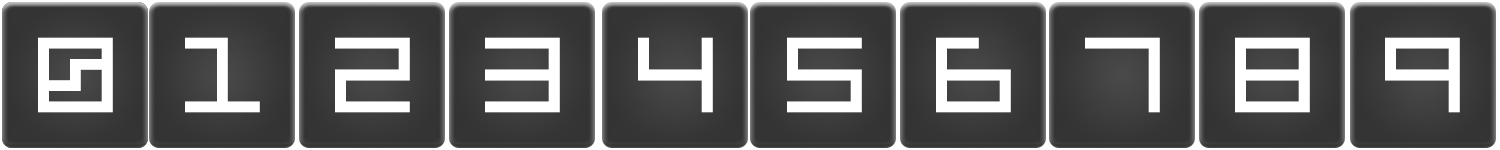
<style>
.page{position:relative;width:1500px;height:150px}
.page>*{position:absolute;margin:0}
.t1{font:170px "CellblockNBP";color:#ffffff}
</style>
<div class="page">
<p class="t1" style="left:38px;top:37px;width:75px;height:76px">0</p>
<p class="t1" style="left:185px;top:37px;width:75px;height:76px">1</p>
<p class="t1" style="left:335px;top:37px;width:75px;height:76px">2</p>
<p class="t1" style="left:485px;top:37px;width:75px;height:76px">3</p>
<p class="t1" style="left:638px;top:37px;width:75px;height:76px">4</p>
<p class="t1" style="left:787px;top:37px;width:75px;height:76px">5</p>
<p class="t1" style="left:936px;top:37px;width:75px;height:76px">6</p>
<p class="t1" style="left:1085px;top:37px;width:75px;height:76px">7</p>
<p class="t1" style="left:1235px;top:37px;width:75px;height:76px">8</p>
<p class="t1" style="left:1385px;top:37px;width:75px;height:76px">9</p>
</div>
